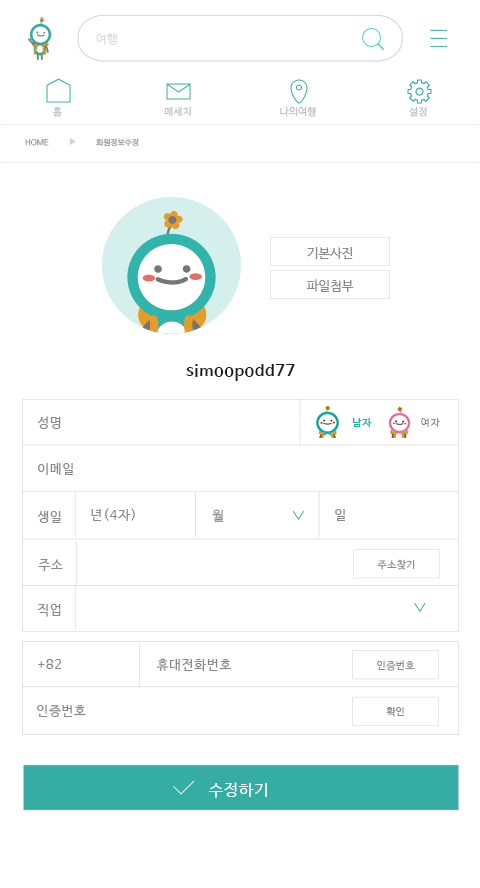
<style>
.page{position:relative;width:480px;height:888px;background:#ffffff}
.page>*{position:absolute;margin:0}
.t1{font:12px "NanumBarunGothic";letter-spacing:0.025em;color:#dcdcdc}
.t2{font:10px "NanumBarunGothic";letter-spacing:0.025em;color:#bfbfbf}
.t3{font:8px "NanumBarunGothic";color:#999a9a}
.t4{font:12.6px "NanumBarunGothic";letter-spacing:0.025em;color:#898989}
.t5{font:15.8px "NanumBarunGothicBold";letter-spacing:0.05em;color:#1b1b1b}
.t6{font:13px "NanumBarunGothic";letter-spacing:0.05em;color:#898989}
.t7{font:10.2px "NanumBarunGothicBold";letter-spacing:0.05em;color:#25b7aa}
.t8{font:10.2px "NanumBarunGothic";letter-spacing:0.05em;color:#898989}
.t9{font:10.2px "NanumBarunGothic";letter-spacing:0.025em;color:#898989}
.t10{font:15.8px "NanumBarunGothic";letter-spacing:0.05em;color:#ffffff}
</style>
<div class="page">
<p class="t1" style="left:96px;top:33px;width:21px;height:12px">여행</p>
<p class="t2" style="left:52px;top:106px;width:11px;height:11px">홈</p>
<p class="t2" style="left:164px;top:107px;width:27px;height:9px">메세지</p>
<p class="t2" style="left:280px;top:106px;width:36px;height:11px">나의여행</p>
<p class="t2" style="left:409px;top:107px;width:18px;height:10px">설정</p>
<p class="t3" style="left:25px;top:139px;width:24px;height:7px">HOME</p>
<p class="t3" style="left:96px;top:138px;width:43px;height:9px">회원정보수정</p>
<p class="t4" style="left:307px;top:247px;width:46px;height:12px">기본사진</p>
<p class="t4" style="left:307px;top:279px;width:47px;height:13px">파일첨부</p>
<p class="t5" style="left:186px;top:364px;width:109px;height:17px">simoopodd77</p>
<p class="t6" style="left:37px;top:416px;width:24px;height:13px">성명</p>
<p class="t7" style="left:352px;top:418px;width:20px;height:9px">남자</p>
<p class="t8" style="left:421px;top:418px;width:19px;height:9px">여자</p>
<p class="t6" style="left:38px;top:463px;width:35px;height:12px">이메일</p>
<p class="t6" style="left:91px;top:508px;width:44px;height:13px">년(4자)</p>
<p class="t6" style="left:212px;top:509px;width:12px;height:13px">월</p>
<p class="t6" style="left:335px;top:509px;width:10px;height:12px">일</p>
<p class="t6" style="left:37px;top:511px;width:24px;height:12px">생일</p>
<p class="t6" style="left:38px;top:559px;width:25px;height:12px">주소</p>
<p class="t9" style="left:377px;top:559px;width:38px;height:11px">주소찾기</p>
<p class="t6" style="left:37px;top:604px;width:24px;height:13px">직업</p>
<p class="t6" style="left:38px;top:659px;width:24px;height:10px">+82</p>
<p class="t6" style="left:156px;top:658px;width:75px;height:13px">휴대전화번호</p>
<p class="t9" style="left:377px;top:660px;width:38px;height:11px">인증번호</p>
<p class="t6" style="left:37px;top:705px;width:49px;height:13px">인증번호</p>
<p class="t9" style="left:386px;top:706px;width:18px;height:11px">확인</p>
<p class="t10" style="left:208px;top:782px;width:59px;height:16px">수정하기</p>
</div>
